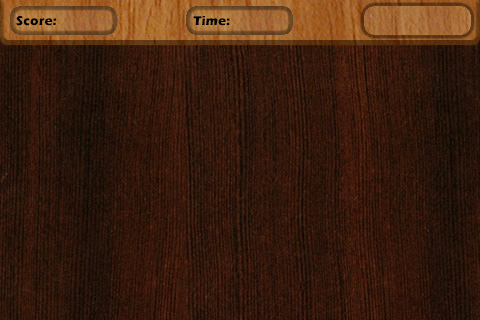
<style>
.page{position:relative;width:480px;height:320px}
.page>*{position:absolute;margin:0}
.t1{font:13.3px "ErasITC-Bold";color:#000000}
</style>
<div class="page">
<p class="t1" style="left:16px;top:16px;width:40px;height:10px">Score:</p>
<p class="t1" style="left:193px;top:16px;width:37px;height:10px">Time:</p>
</div>
